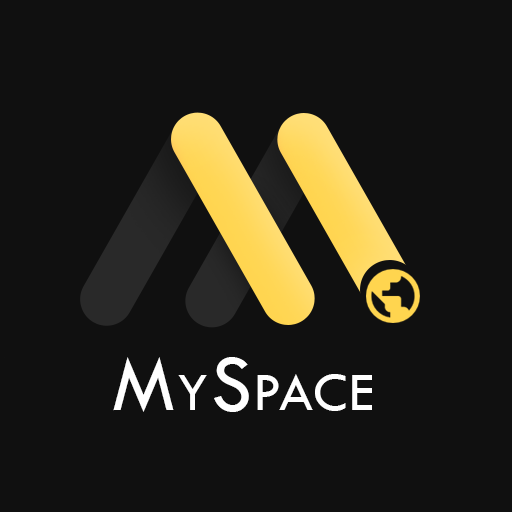
<style>
.page{position:relative;width:512px;height:512px;background:#101010}
.page>*{position:absolute;margin:0}
.t1{font:82px "TwCenMT-Regular";letter-spacing:0.02em;color:#ffffff;font-variant:small-caps}
</style>
<div class="page">
<p class="t1" style="left:113px;top:357px;width:259px;height:55px">MySpace</p>
</div>
